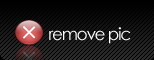
<style>
.page{position:relative;width:154px;height:60px;background:#000000}
.page>*{position:absolute;margin:0}
.t1{font:17px "CenturyGothic";letter-spacing:-0.075em;color:#ffffff}
</style>
<div class="page">
<p class="t1" style="left:49px;top:27px;width:82px;height:17px">remove pic</p>
</div>
